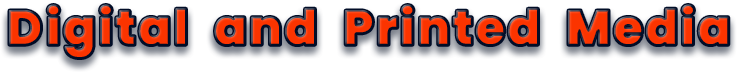
<style>
.page{position:relative;width:738px;height:74px;background:#ffffff}
.page>*{position:absolute;margin:0}
.t1{font:48px "Poppins-ExtraBold";letter-spacing:0.025em;font-weight:bold}
.t2{font:48px "Poppins-ExtraBold";letter-spacing:0.05em;font-weight:bold}
</style>
<div class="page">
<p class="t1" style="left:9px;top:4px;width:720px;height:55px"><span class="t2">D</span>igital  and  Printed  Media</p>
</div>
